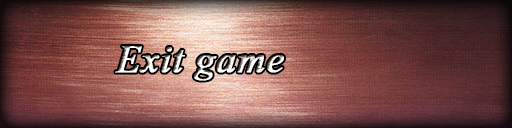
<style>
.page{position:relative;width:512px;height:128px}
.page>*{position:absolute;margin:0}
.t1{font:48px "Vijaya";letter-spacing:0.005em;font-weight:bold}
</style>
<div class="page">
<p class="t1" style="left:115px;top:46px;width:169px;height:35px">Exit game</p>
</div>
